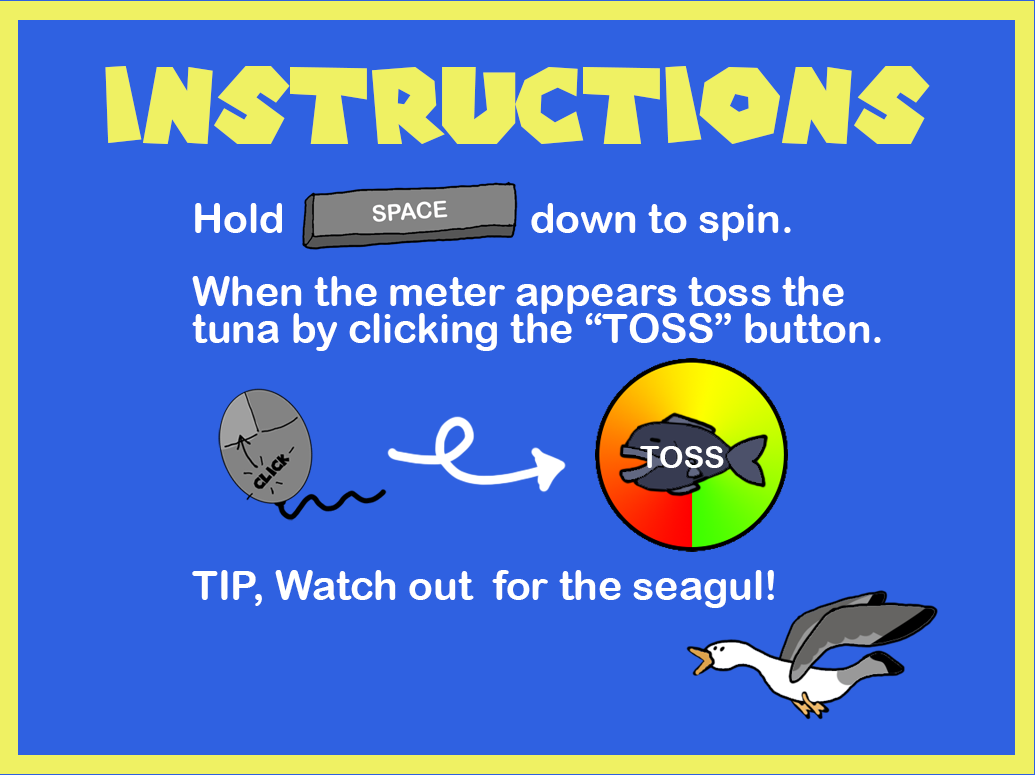
<style>
.page{position:relative;width:1035px;height:775px;background:#2f61e1}
.page>*{position:absolute;margin:0}
.t1{font:104.1px "SuperMarioGalaxy";color:#eff163}
.t2{font:40.9px/36.7px "ArialRoundedMTBold";color:#ffffff}
.t3{font:31px "ArialRoundedMTBold";color:#ffffff}
</style>
<div class="page">
<p class="t1" style="left:105px;top:66px;width:825px;height:78px">Instructions</p>
<p class="t2" style="left:192px;top:203px;width:689px;height:405px">Hold                        down to spin.<br><br>When the meter appears toss the <br>tuna by clicking the “TOSS” button.<br><br><br><br><br><br><br>TIP, Watch out  for the seagul!</p>
<p class="t3" style="left:640px;top:446px;width:84px;height:22px">TOSS</p>
</div>
